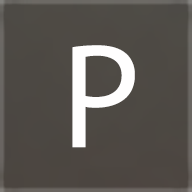
<style>
.page{position:relative;width:192px;height:192px}
.page>*{position:absolute;margin:0}
.t1{font:150px "MyriadPro-Regular";letter-spacing:0.06em;color:#fffefe;text-transform:uppercase}
</style>
<div class="page">
<p class="t1" style="left:72px;top:45px;width:63px;height:103px">P</p>
</div>
